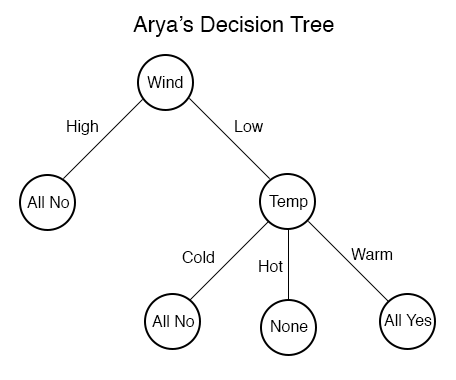
<style>
.page{position:relative;width:456px;height:380px;background:#ffffff}
.page>*{position:absolute;margin:0}
.t1{font:22px "Helvetica";color:#000000}
.t2{font:16px "Helvetica";color:#000000}
</style>
<div class="page">
<p class="t1" style="left:133px;top:16px;width:201px;height:21px">Arya’s Decision Tree</p>
<p class="t2" style="left:147px;top:76px;width:36px;height:12px">Wind</p>
<p class="t2" style="left:67px;top:120px;width:31px;height:15px">High</p>
<p class="t2" style="left:235px;top:120px;width:28px;height:12px">Low</p>
<p class="t2" style="left:27px;top:196px;width:43px;height:12px">All No</p>
<p class="t2" style="left:269px;top:195px;width:39px;height:15px">Temp</p>
<p class="t2" style="left:182px;top:251px;width:32px;height:12px">Cold</p>
<p class="t2" style="left:351px;top:248px;width:42px;height:12px">Warm</p>
<p class="t2" style="left:259px;top:260px;width:24px;height:12px">Hot</p>
<p class="t2" style="left:152px;top:315px;width:43px;height:12px">All No</p>
<p class="t2" style="left:384px;top:314px;width:48px;height:12px">All Yes</p>
<p class="t2" style="left:271px;top:320px;width:37px;height:12px">None</p>
</div>
